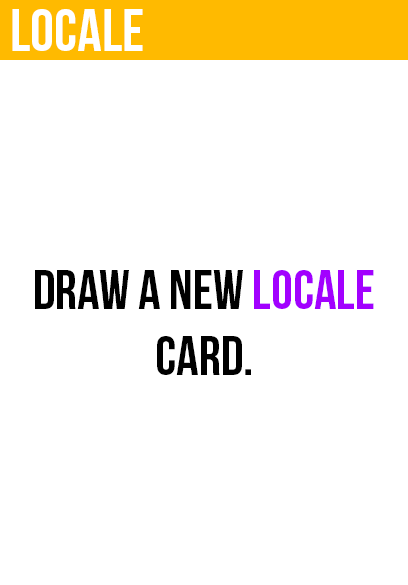
<style>
.page{position:relative;width:408px;height:585px;background:#ffffff}
.page>*{position:absolute;margin:0}
.t1{font:60px "BebasNeue";color:#ffffff}
.t2{font:55px "BebasNeue";color:#000000}
.t3{font:55px "BebasNeue";color:#a200ff}
</style>
<div class="page">
<p class="t1" style="left:12px;top:9px;width:131px;height:42px">locale</p>
<p class="t2" style="left:35px;top:270px;width:339px;height:105px;text-align:center">draw a new <span class="t3">locale<br></span>card.</p>
</div>
